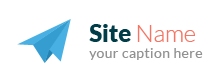
<style>
.page{position:relative;width:220px;height:81px;background:#ffffff}
.page>*{position:absolute;margin:0}
.t1{font:23.6px "Lato-Black";color:#003d48}
.t2{font:23.6px "Lato-Light";color:#f77462}
.t3{font:13.6px "Lato-Regular";letter-spacing:0.04em;color:#929292}
</style>
<div class="page">
<p class="t1" style="left:89px;top:24px;width:106px;height:18px">Site <span class="t2">Name</span></p>
<p class="t3" style="left:89px;top:48px;width:114px;height:12px">your caption here</p>
</div>
